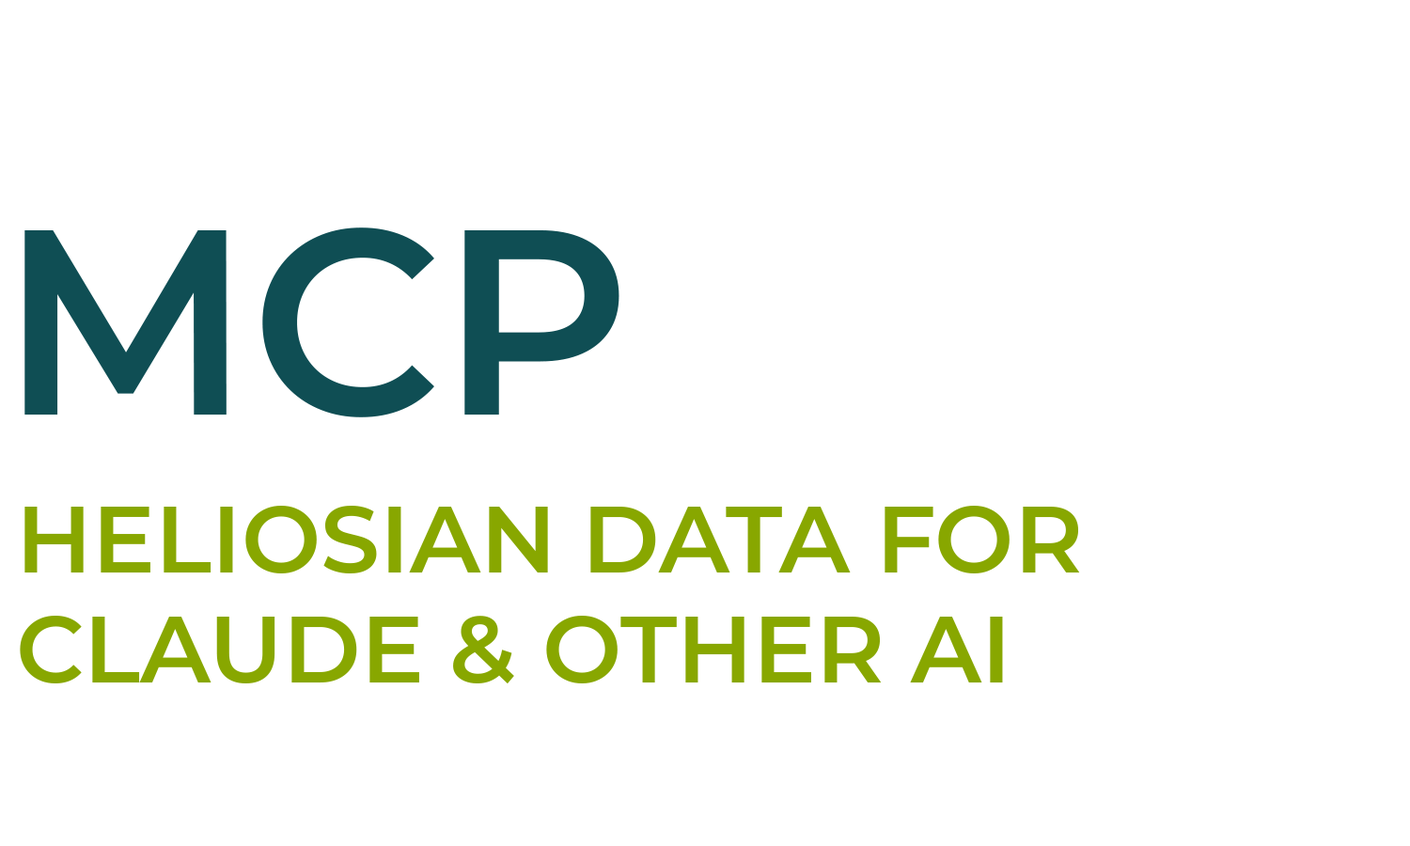
<style>
.page{position:relative;width:1410px;height:846px;background:#ffffff}
.page>*{position:absolute;margin:0}
.t1{font:263.1px "Montserrat-SemiBold";color:#0f4e54}
.t2{font:94px/0.2px "Montserrat-SemiBold";color:#88a700;text-transform:uppercase}
</style>
<div class="page">
<p class="t1" style="left:24px;top:227px;width:595px;height:190px">MCP</p>
<p class="t2" style="left:20px;top:506px;width:1060px;height:178px">HELIOSIAN DATA FOR<br>CLAUDE &amp; OTHER AI</p>
</div>
